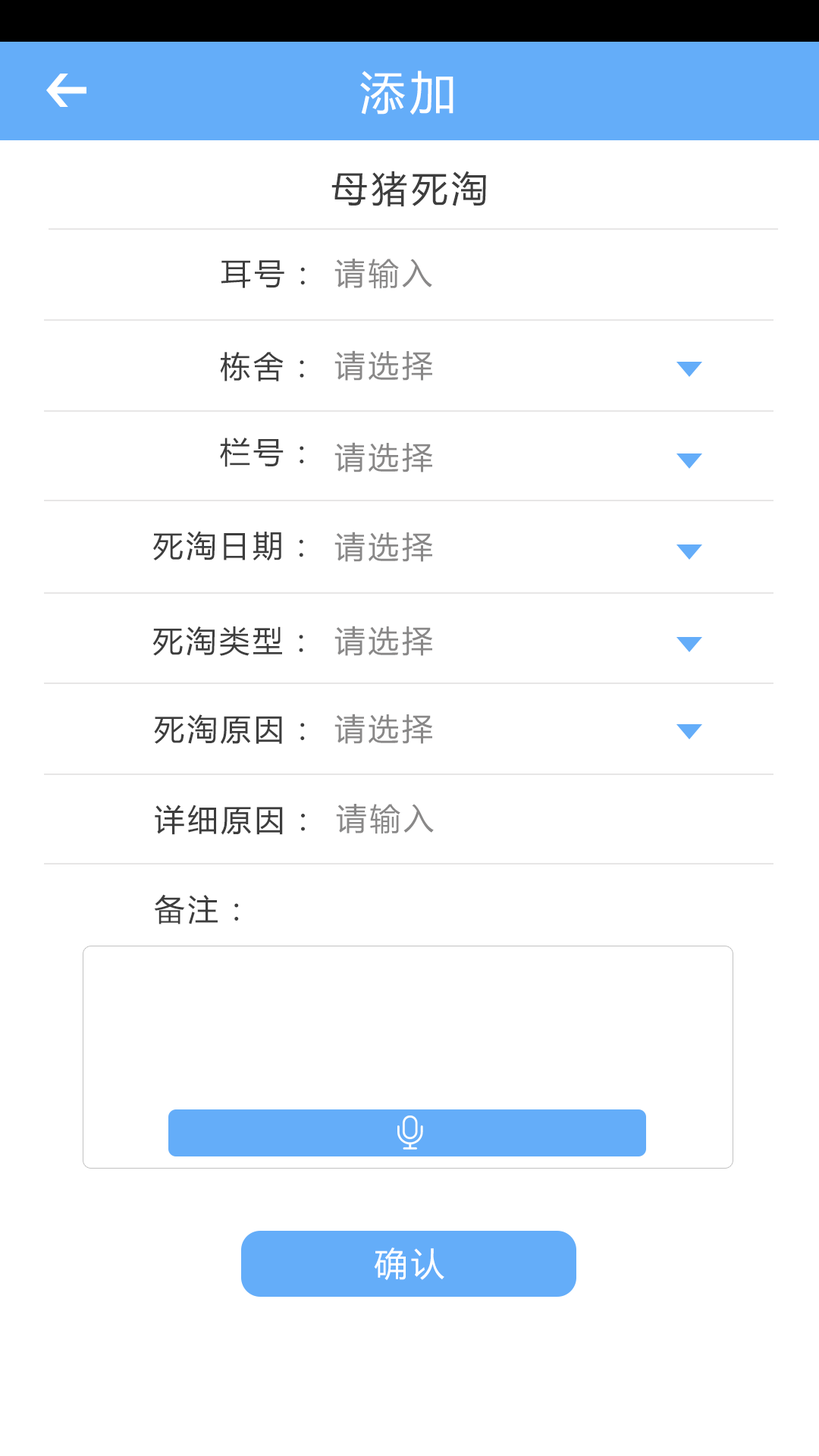
<style>
.page{position:relative;width:819px;height:1456px;background:#ffffff}
.page>*{position:absolute;margin:0}
.t1{font:45.5px "MicrosoftYaHei";letter-spacing:0.1em;color:#ffffff}
.t2{font:36.4px "MicrosoftYaHei";letter-spacing:0.1em;color:#3d3d3d}
.t3{font:30.3px "MicrosoftYaHei";letter-spacing:0.1em;color:#3d3d3d}
.t4{font:30.7px "MicrosoftYaHei";letter-spacing:0.1em;color:#898888}
.t5{font:33.4px "MicrosoftYaHei";letter-spacing:0.1em;color:#ffffff}
</style>
<div class="page">
<p class="t1" style="left:360px;top:71px;width:93px;height:44px">添加</p>
<p class="t2" style="left:331px;top:171px;width:155px;height:36px">母猪死淘</p>
<p class="t3" style="left:221px;top:260px;width:84px;height:28px">耳号：</p>
<p class="t4" style="left:334px;top:259px;width:98px;height:30px">请输入</p>
<p class="t3" style="left:220px;top:352px;width:84px;height:29px">栋舍：</p>
<p class="t4" style="left:334px;top:350px;width:98px;height:31px">请选择</p>
<p class="t3" style="left:220px;top:438px;width:84px;height:29px">栏号：</p>
<p class="t4" style="left:334px;top:442px;width:98px;height:30px">请选择</p>
<p class="t3" style="left:153px;top:531px;width:150px;height:30px">死淘日期：</p>
<p class="t4" style="left:334px;top:532px;width:98px;height:30px">请选择</p>
<p class="t3" style="left:152px;top:626px;width:151px;height:30px">死淘类型：</p>
<p class="t4" style="left:334px;top:626px;width:98px;height:30px">请选择</p>
<p class="t4" style="left:334px;top:714px;width:98px;height:30px">请选择</p>
<p class="t3" style="left:154px;top:714px;width:151px;height:31px">死淘原因：</p>
<p class="t3" style="left:155px;top:805px;width:150px;height:30px">详细原因：</p>
<p class="t4" style="left:336px;top:804px;width:98px;height:30px">请输入</p>
<p class="t3" style="left:154px;top:894px;width:85px;height:30px">备注：</p>
<p class="t5" style="left:374px;top:1247px;width:70px;height:33px">确认</p>
</div>
